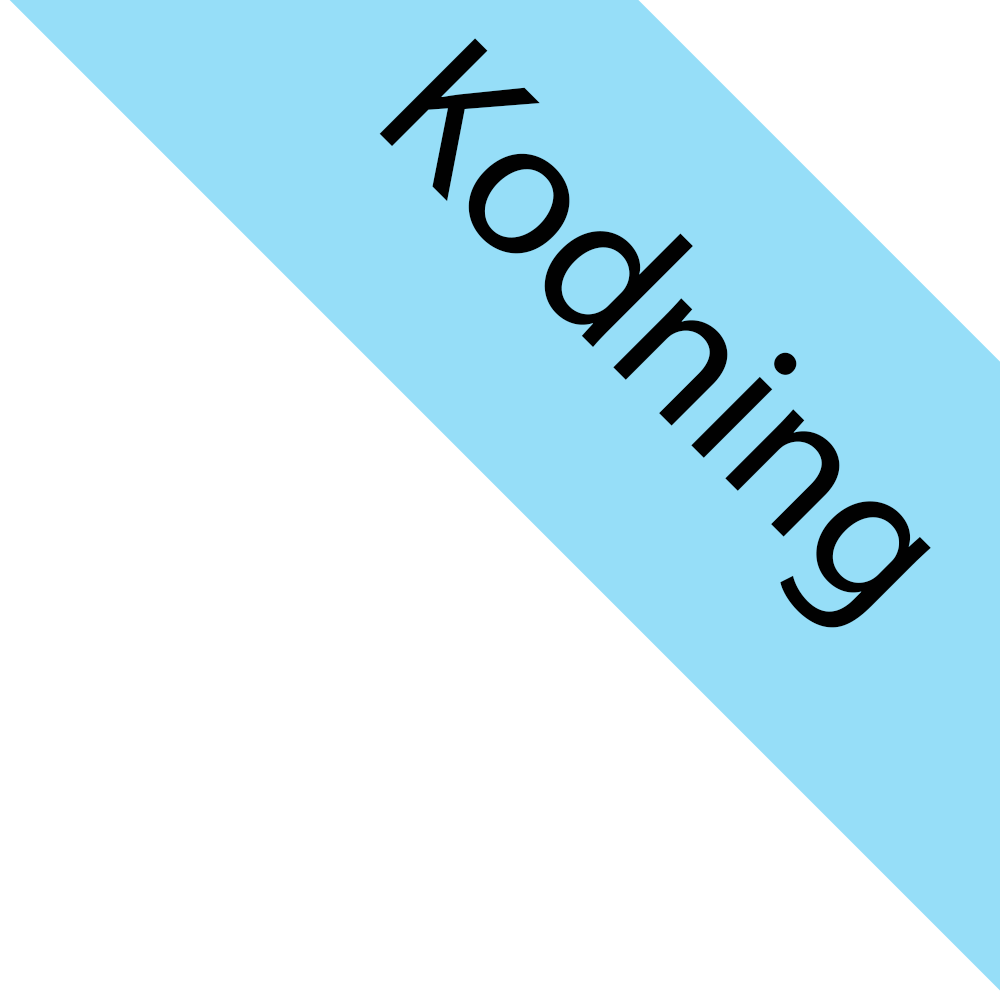
<style>
.page{position:relative;width:1000px;height:1000px;background:#ffffff}
.page>*{position:absolute;margin:0}
.t1{font:200px "MyriadPro-Regular";color:#010101}
</style>
<div class="page">
<p class="t1" style="left:379px;top:38px;width:552px;height:590px;rotate:45deg">Kodning</p>
</div>
